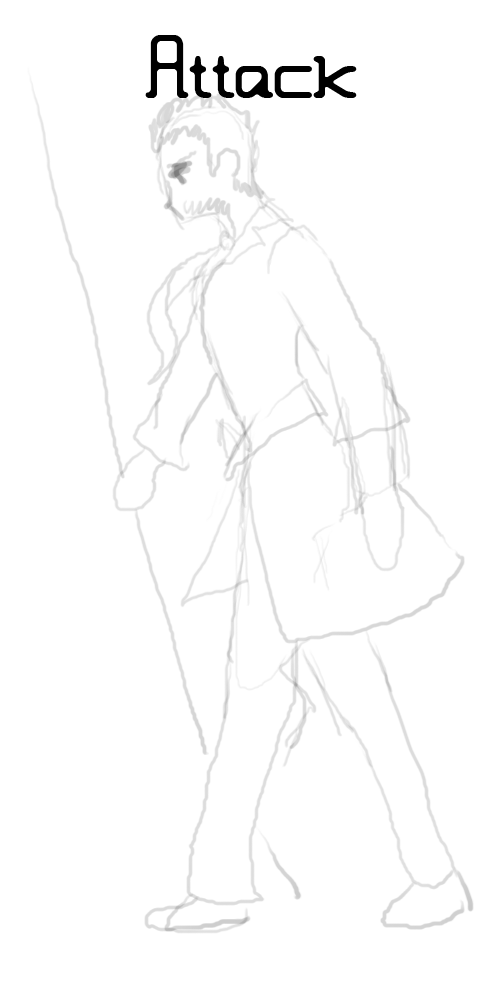
<style>
.page{position:relative;width:500px;height:1000px;background:#ffffff}
.page>*{position:absolute;margin:0}
.t1{font:72px "MoronicMisfireBRK";color:#000000}
</style>
<div class="page">
<p class="t1" style="left:145px;top:35px;width:212px;height:63px">Attack</p>
</div>
